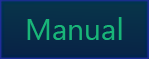
<style>
.page{position:relative;width:149px;height:59px}
.page>*{position:absolute;margin:0}
.t1{font:30px "SegoeUISymbol";color:#19b579}
</style>
<div class="page">
<p class="t1" style="left:27px;top:17px;width:95px;height:23px">Manual</p>
</div>
